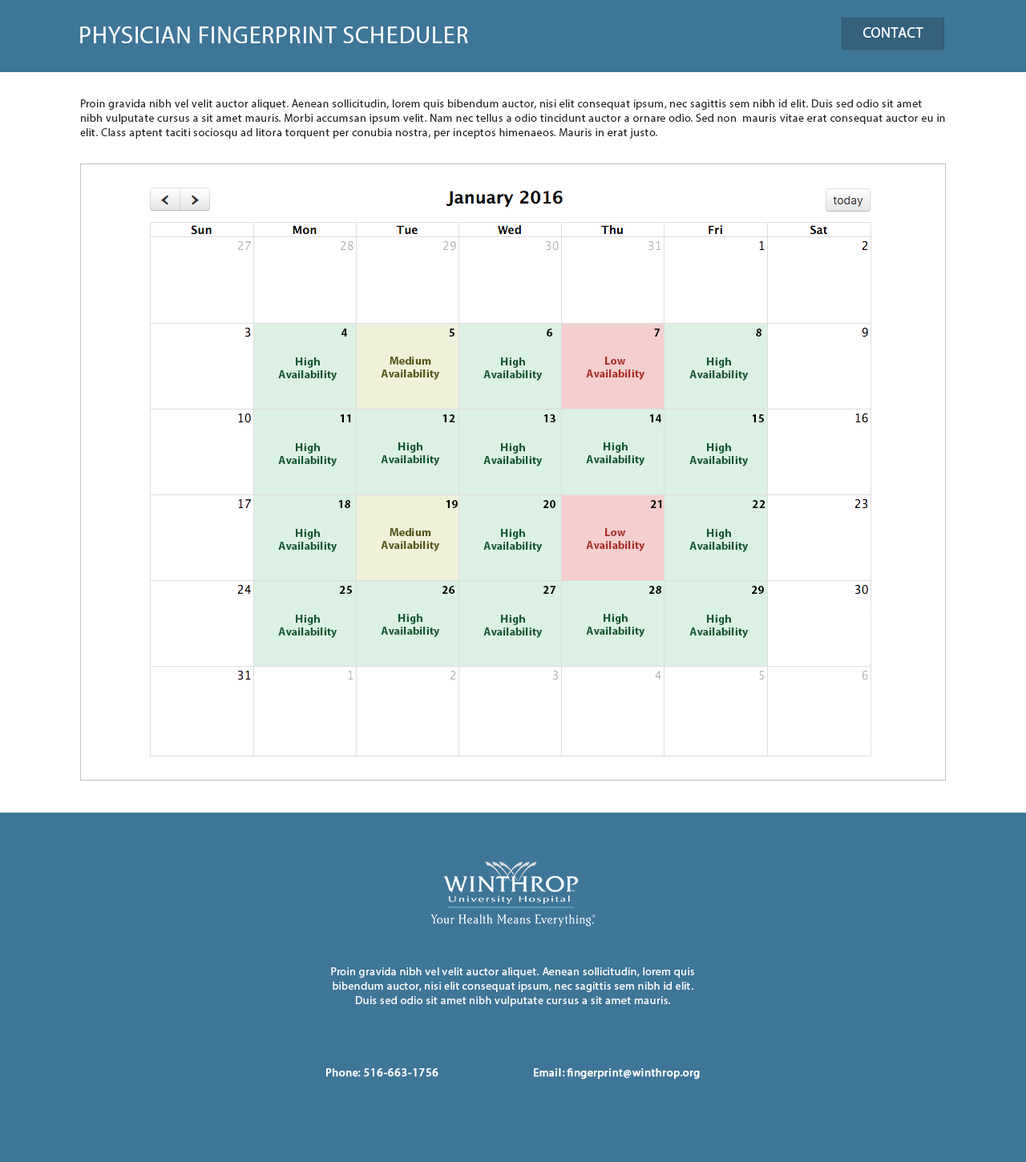
<style>
.page{position:relative;width:1026px;height:1162px;background:#ffffff}
.page>*{position:absolute;margin:0}
.t1{font:24px "MyriadPro-Regular";letter-spacing:0.025em;color:#ffffff;text-transform:uppercase}
.t2{font:14.4px "MyriadPro-Regular";letter-spacing:0.025em;color:#ffffff;text-transform:uppercase}
.t3{font:11.2px/14.4px "MyriadPro-Regular";letter-spacing:0.025em;color:#222222}
.t4{font:11.2px "MyriadPro-Bold";letter-spacing:0.02em;color:#000000}
.t5{font:11.2px/12.8px "MyriadPro-Bold";letter-spacing:0.02em;color:#145730}
.t6{font:11.2px/12.8px "MyriadPro-Bold";letter-spacing:0.02em;color:#575514}
.t7{font:11.2px/12.8px "MyriadPro-Bold";letter-spacing:0.02em;color:#a82e24}
.t8{font:11.2px/14.4px "MyriadPro-Regular";letter-spacing:0.025em;color:#ffffff}
.t9{font:11.2px/14.4px "MyriadPro-Regular";letter-spacing:0.025em;color:#ffffff;font-weight:bold}
</style>
<div class="page">
<p class="t1" style="left:80px;top:26px;width:388px;height:17px">PHYSICIAN FINGERPRINT SCHEDULER</p>
<p class="t2" style="left:863px;top:27px;width:60px;height:11px">Contact</p>
<p class="t3" style="left:80px;top:99px;width:865px;height:40px">Proin gravida nibh vel velit auctor aliquet. Aenean sollicitudin, lorem quis bibendum auctor, nisi elit consequat ipsum, nec sagittis sem nibh id elit. Duis sed odio sit amet nibh vulputate cursus a sit amet mauris. Morbi accumsan ipsum velit. Nam nec tellus a odio tincidunt auctor a ornare odio. Sed non  mauris vitae erat consequat auctor eu in elit. Class aptent taciti sociosqu ad litora torquent per conubia nostra, per inceptos himenaeos. Mauris in erat justo.</p>
<p class="t4" style="left:341px;top:329px;width:6px;height:8px">4</p>
<p class="t4" style="left:449px;top:329px;width:5px;height:8px">5</p>
<p class="t4" style="left:547px;top:329px;width:6px;height:8px">6</p>
<p class="t4" style="left:654px;top:329px;width:6px;height:8px">7</p>
<p class="t4" style="left:756px;top:329px;width:5px;height:8px">8</p>
<p class="t5" style="left:278px;top:357px;width:59px;height:24px;text-align:center">High <br>Availability</p>
<p class="t6" style="left:381px;top:357px;width:59px;height:23px;text-align:center">Medium<br>Availability</p>
<p class="t5" style="left:483px;top:357px;width:60px;height:24px;text-align:center">High <br>Availability</p>
<p class="t7" style="left:586px;top:357px;width:59px;height:23px;text-align:center">Low<br>Availability</p>
<p class="t5" style="left:689px;top:357px;width:60px;height:24px;text-align:center">High <br>Availability</p>
<p class="t4" style="left:340px;top:414px;width:11px;height:8px">11</p>
<p class="t4" style="left:442px;top:414px;width:13px;height:8px">12</p>
<p class="t4" style="left:543px;top:414px;width:12px;height:8px">13</p>
<p class="t4" style="left:649px;top:414px;width:12px;height:8px">14</p>
<p class="t4" style="left:752px;top:414px;width:12px;height:8px">15</p>
<p class="t5" style="left:278px;top:443px;width:59px;height:23px;text-align:center">High <br>Availability</p>
<p class="t5" style="left:381px;top:442px;width:59px;height:24px;text-align:center">High <br>Availability</p>
<p class="t5" style="left:483px;top:443px;width:60px;height:23px;text-align:center">High <br>Availability</p>
<p class="t5" style="left:586px;top:442px;width:59px;height:24px;text-align:center">High <br>Availability</p>
<p class="t5" style="left:689px;top:443px;width:60px;height:23px;text-align:center">High <br>Availability</p>
<p class="t4" style="left:338px;top:500px;width:12px;height:8px">18</p>
<p class="t4" style="left:446px;top:500px;width:12px;height:8px">19</p>
<p class="t4" style="left:543px;top:500px;width:12px;height:8px">20</p>
<p class="t4" style="left:651px;top:500px;width:11px;height:8px">21</p>
<p class="t4" style="left:753px;top:500px;width:12px;height:8px">22</p>
<p class="t5" style="left:278px;top:529px;width:59px;height:23px;text-align:center">High <br>Availability</p>
<p class="t6" style="left:381px;top:528px;width:59px;height:23px;text-align:center">Medium<br>Availability</p>
<p class="t5" style="left:483px;top:529px;width:60px;height:23px;text-align:center">High <br>Availability</p>
<p class="t7" style="left:586px;top:528px;width:59px;height:23px;text-align:center">Low<br>Availability</p>
<p class="t5" style="left:689px;top:529px;width:60px;height:23px;text-align:center">High <br>Availability</p>
<p class="t4" style="left:340px;top:586px;width:12px;height:8px">25</p>
<p class="t4" style="left:442px;top:586px;width:13px;height:8px">26</p>
<p class="t4" style="left:543px;top:586px;width:12px;height:8px">27</p>
<p class="t4" style="left:649px;top:586px;width:12px;height:8px">28</p>
<p class="t4" style="left:752px;top:586px;width:12px;height:8px">29</p>
<p class="t5" style="left:278px;top:615px;width:59px;height:23px;text-align:center">High <br>Availability</p>
<p class="t5" style="left:381px;top:614px;width:59px;height:23px;text-align:center">High <br>Availability</p>
<p class="t5" style="left:483px;top:615px;width:60px;height:23px;text-align:center">High <br>Availability</p>
<p class="t5" style="left:586px;top:614px;width:59px;height:23px;text-align:center">High <br>Availability</p>
<p class="t5" style="left:689px;top:615px;width:60px;height:23px;text-align:center">High <br>Availability</p>
<p class="t8" style="left:326px;top:967px;width:374px;height:113px;text-align:center">Proin gravida nibh vel velit auctor aliquet. Aenean sollicitudin, lorem quis bibendum auctor, nisi elit consequat ipsum, nec sagittis sem nibh id elit. Duis sed odio sit amet nibh vulputate cursus a sit amet mauris.<br><br><span class="t9"><br><br><br>Phone: 516-663-1756          Email: fingerprint@winthrop.org</span></p>
</div>
